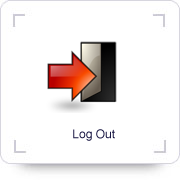
<style>
.page{position:relative;width:180px;height:180px;background:#ffffff}
.page>*{position:absolute;margin:0}
.t1{font:12px "ArialMT";color:#181643}
</style>
<div class="page">
<p class="t1" style="left:73px;top:129px;width:42px;height:12px">Log Out</p>
</div>
